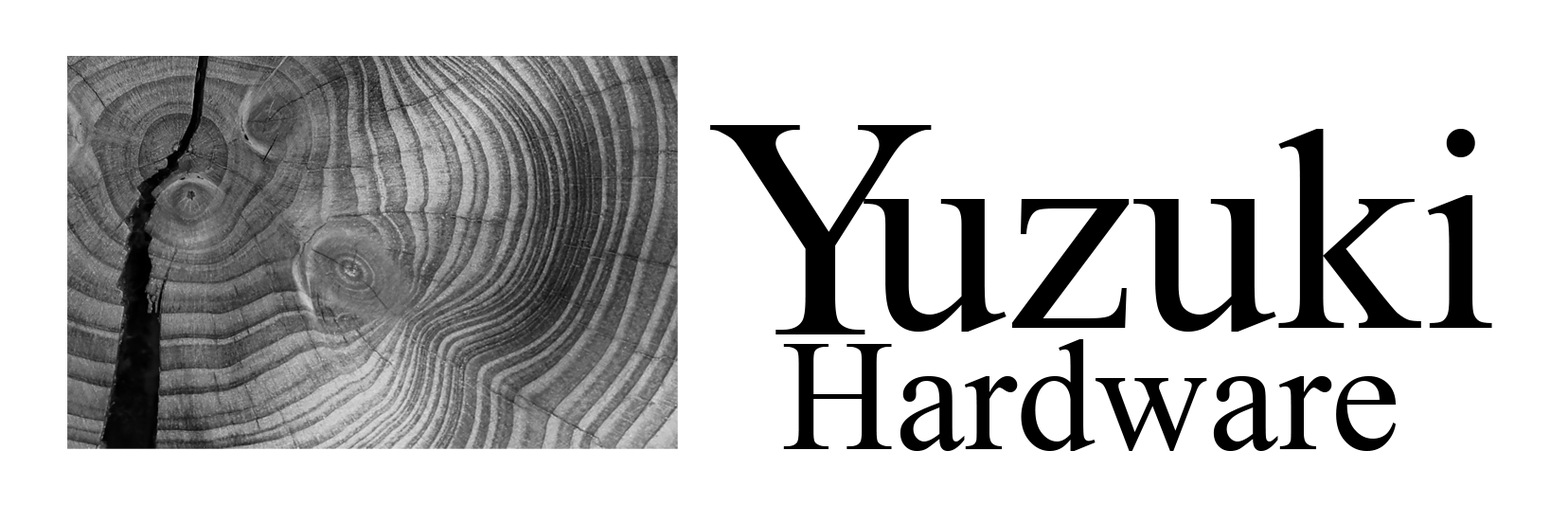
<style>
.page{position:relative;width:1568px;height:505px;background:#ffffff}
.page>*{position:absolute;margin:0}
.t1{font:316.5px "TimesNewRomanPSMT";color:#000000}
.t2{font:286.4px "TimesNewRomanPSMT";color:#000000}
.t3{font:156.9px "TimesNewRomanPSMT";color:#000000}
</style>
<div class="page">
<p class="t1" style="left:710px;top:125px;width:222px;height:209px">Y</p>
<p class="t2" style="left:864px;top:129px;width:628px;height:202px">uzuki</p>
<p class="t3" style="left:783px;top:339px;width:613px;height:112px">Hardware</p>
</div>
